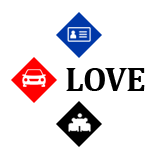
<style>
.page{position:relative;width:160px;height:160px;background:#ffffff}
.page>*{position:absolute;margin:0}
.t1{font:33.5px "Cambria-Bold";color:#000000}
</style>
<div class="page">
<p class="t1" style="left:66px;top:68px;width:79px;height:23px">LOVE</p>
</div>
